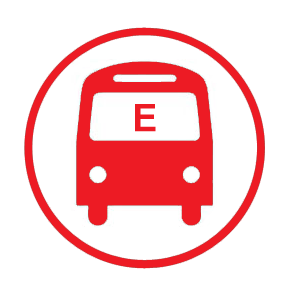
<style>
.page{position:relative;width:288px;height:288px;background:#ffffff}
.page>*{position:absolute;margin:0}
.t1{font:38px "Arial-BoldMT";color:#ed1b24}
</style>
<div class="page">
<p class="t1" style="left:135px;top:104px;width:21px;height:28px">E</p>
</div>
